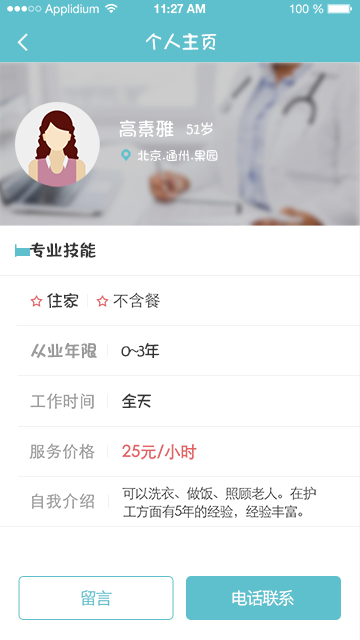
<style>
.page{position:relative;width:360px;height:640px;background:#ffffff}
.page>*{position:absolute;margin:0}
.t1{font:18px "STHeitiSC-Light";color:#ffffff}
.t2{font:14px "STHeitiSC-Light";color:#ffffff}
.t3{font:12px "STHeitiSC-Light";color:#ffffff}
.t4{font:16px "STHeitiSC-Light";color:#333333;font-weight:bold}
.t5{font:16px "STHeitiSC-Light";color:#333333}
.t6{font:16px "HiraginoSansGB-W3";letter-spacing:-0.08em;color:#333333}
.t7{font:16px "STHeitiSC-Light";color:#999999;font-weight:bold}
.t8{font:16px "STHeitiSC-Light";letter-spacing:-0.08em;color:#333333}
.t9{font:16px "HiraginoSansGB-W3";letter-spacing:-0.08em;color:#999999}
.t10{font:16px "STHeitiSC-Light";color:#e26163;font-weight:bold}
.t11{font:14px "HiraginoSansGB-W3";letter-spacing:-0.08em;color:#e26163}
.t12{font:14px/20px "STHeitiSC-Light";letter-spacing:-0.08em;color:#333333}
.t13{font:16px/5.6px "HiraginoSansGB-W3";letter-spacing:-0.08em;color:#333333}
.t14{font:17px "HiraginoSansGB-W3";letter-spacing:-0.08em;color:#5fc0cd}
.t15{font:17px "HiraginoSansGB-W3";letter-spacing:-0.08em;color:#ffffff}
</style>
<div class="page">
<p class="t1" style="left:145px;top:33px;width:72px;height:17px">个人主页</p>
<p class="t1" style="left:119px;top:120px;width:55px;height:17px">高素雅</p>
<p class="t2" style="left:186px;top:122px;width:27px;height:14px">51岁</p>
<p class="t3" style="left:138px;top:149px;width:80px;height:12px">北京.通州.果园</p>
<p class="t4" style="left:30px;top:242px;width:66px;height:16px">专业技能</p>
<p class="t5" style="left:47px;top:293px;width:32px;height:15px">住家</p>
<p class="t5" style="left:113px;top:292px;width:47px;height:16px"><span class="t6"><br></span>不含餐</p>
<p class="t7" style="left:31px;top:343px;width:66px;height:16px">从业年限</p>
<p class="t8" style="left:121px;top:343px;width:39px;height:15px">0~3年</p>
<p class="t7" style="left:30px;top:393px;width:64px;height:16px"><span class="t9"><br></span>工作时间</p>
<p class="t8" style="left:122px;top:393px;width:29px;height:15px">全天</p>
<p class="t7" style="left:29px;top:443px;width:66px;height:16px"><span class="t9"><br></span>服务价格</p>
<p class="t10" style="left:122px;top:444px;width:75px;height:16px"><span class="t11"><br></span>25元/小时</p>
<p class="t12" style="left:122px;top:486px;width:194px;height:32px"><span class="t13"> </span>可以洗衣、做饭、照顾老人。在护<br>  工方面有5年的经验，经验丰富。</p>
<p class="t7" style="left:32px;top:493px;width:62px;height:16px"><span class="t9"><br></span>自我介绍</p>
<p class="t14" style="left:81px;top:590px;width:31px;height:16px">留言</p>
<p class="t15" style="left:232px;top:590px;width:62px;height:16px">电话联系</p>
</div>
